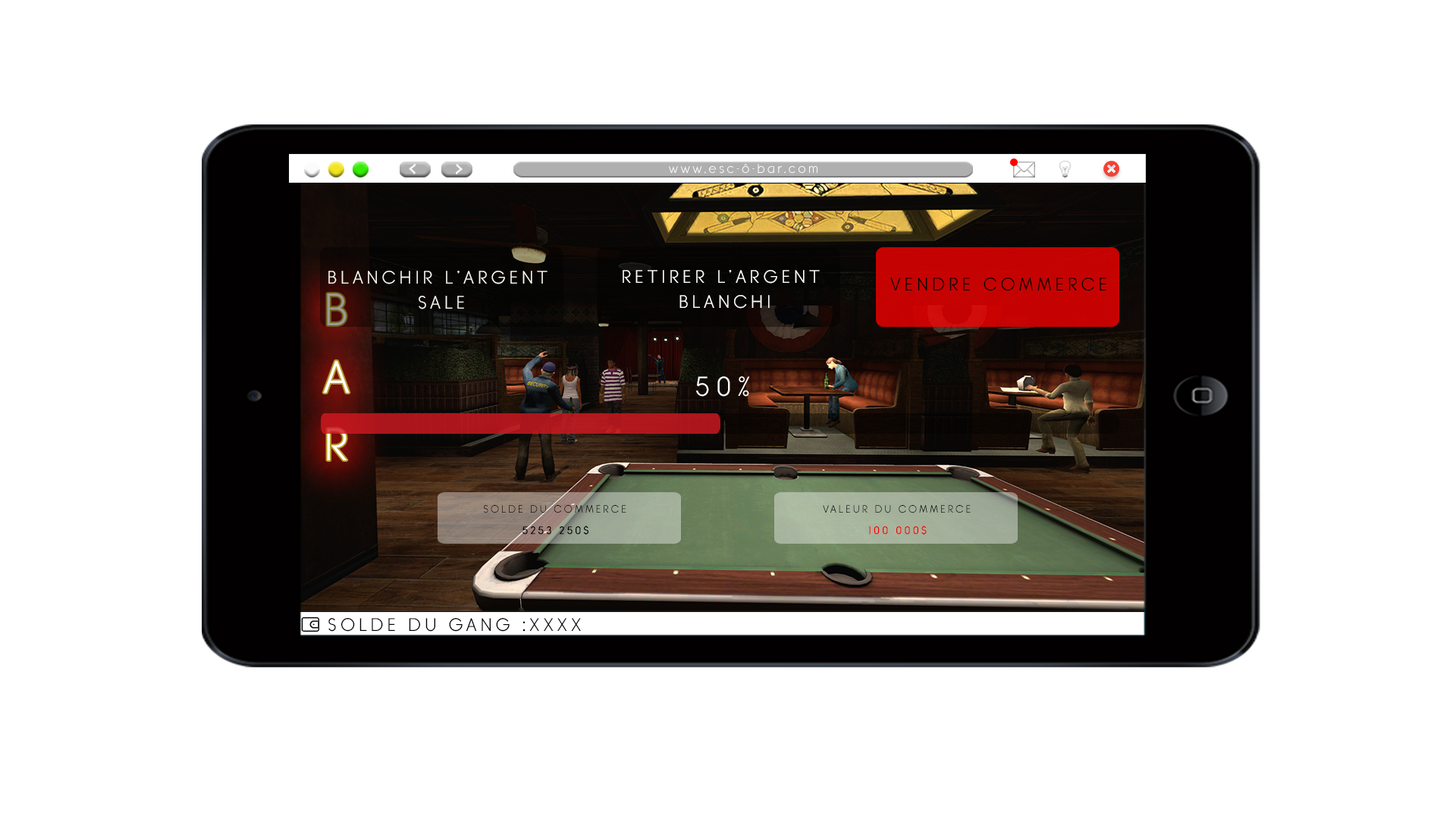
<style>
.page{position:relative;width:1456px;height:819px;background:#ffffff}
.page>*{position:absolute;margin:0}
.t1{font:12.4px "BanksMilesSingleLine";letter-spacing:0.2em;color:#ffffff}
.t2{font:18.2px/24.3px "BanksMilesSingleLine";letter-spacing:0.2em;color:#ffffff}
.t3{font:18.2px/24.3px "BanksMilesSingleLine";letter-spacing:0.2em;color:#fbf8ee}
.t4{font:27.3px "BanksMilesSingleLine";letter-spacing:0.2em;color:#ffffff}
.t5{font:10.6px "BanksMilesSingleLine";letter-spacing:0.2em;color:#000000}
.t6{font:10.6px "BanksMilesSingleLine";letter-spacing:0.2em;color:#000000;font-weight:bold}
.t7{font:10.6px "BanksMilesSingleLine";letter-spacing:0.2em;color:#f20000;font-weight:bold}
.t8{font:18.2px "BanksMilesSingleLine";letter-spacing:0.2em;color:#000000}
</style>
<div class="page">
<p class="t1" style="left:669px;top:164px;width:148px;height:10px">www.esc-ô-bar.com</p>
<p class="t2" style="left:623px;top:270px;width:197px;height:39px;text-align:center">RETIRER L’ARGENT <br>BLANCHI</p>
<p class="t3" style="left:328px;top:271px;width:220px;height:38px;text-align:center">BLANCHIR L’ARGENT <br>SALE</p>
<p class="t4" style="left:696px;top:376px;width:54px;height:21px">50%</p>
<p class="t5" style="left:484px;top:505px;width:142px;height:8px">SOLDE DU COMMERCE</p>
<p class="t5" style="left:823px;top:505px;width:148px;height:8px">VALEUR DU COMMERCE</p>
<p class="t6" style="left:522px;top:526px;width:66px;height:9px">5253 250$</p>
<p class="t7" style="left:868px;top:526px;width:59px;height:9px">100 000$</p>
<p class="t8" style="left:328px;top:618px;width:253px;height:14px">SOLDE DU GANG :XXXX</p>
</div>
